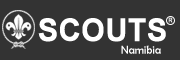
<style>
.page{position:relative;width:180px;height:60px;background:#333333}
.page>*{position:absolute;margin:0}
.t1{font:6.3px "ArialMT";font-weight:bold;scale:0.95 1}
.t2{font:31.5px "Arial-BoldMT";color:#ffffff;font-weight:bold;scale:0.95 1}
.t3{font:11.6px "BerlinSansFB-Reg";color:#ffffff;scale:0.95 1}
</style>
<div class="page">
<p class="t1" style="left:168px;top:17px;width:5px;height:6px">R</p>
<p class="t2" style="left:38px;top:18px;width:128px;height:24px">SCOUTS</p>
<p class="t3" style="left:121px;top:45px;width:40px;height:9px">Namibia</p>
</div>
